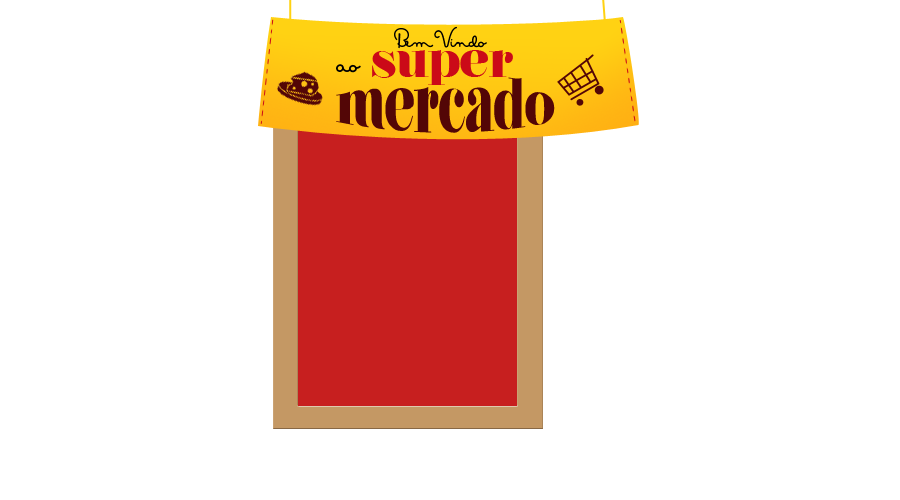
<style>
.page{position:relative;width:900px;height:500px;background:#ffffff}
.page>*{position:absolute;margin:0}
.t1{font:25px "MasanaScript-1Propia";letter-spacing:-0.01em;color:#000000}
.t2{font:50px "NouvelleVague-Black";letter-spacing:-0.01em;color:#cb0a18}
.t3{font:33.3px "MasanaScript-1Propia";letter-spacing:-0.01em;color:#000000}
.t4{font:50px "NouvelleVague-Black";letter-spacing:-0.01em;color:#530606}
</style>
<div class="page">
<p class="t1" style="left:394px;top:26px;width:93px;height:23px">Bem Vindo</p>
<p class="t2" style="left:372px;top:50px;width:141px;height:35px">super</p>
<p class="t3" style="left:336px;top:64px;width:25px;height:9px">ao</p>
<p class="t4" style="left:336px;top:77px;width:219px;height:56px">mercado</p>
</div>
